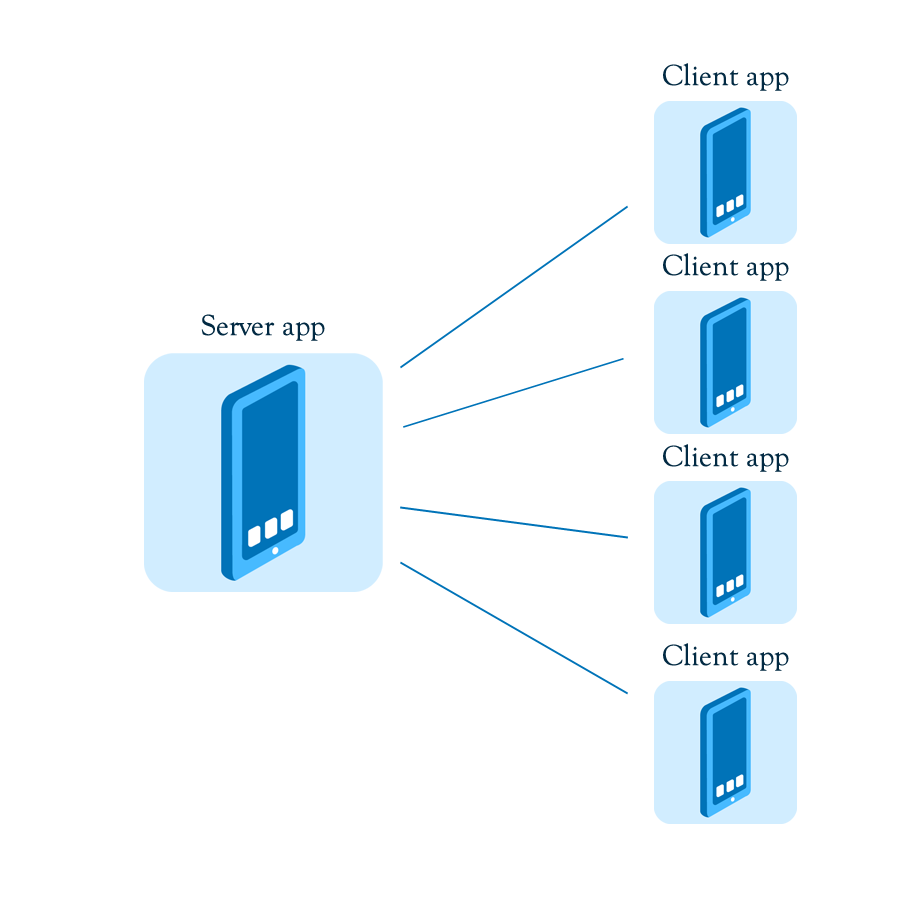
<style>
.page{position:relative;width:900px;height:900px;background:#ffffff}
.page>*{position:absolute;margin:0}
.t1{font:30px "GoudyOldStyleT-Regular";color:#022a43}
</style>
<div class="page">
<p class="t1" style="left:663px;top:63px;width:126px;height:28px">Client app</p>
<p class="t1" style="left:663px;top:253px;width:126px;height:28px">Client app</p>
<p class="t1" style="left:201px;top:314px;width:124px;height:27px">Server app</p>
<p class="t1" style="left:663px;top:444px;width:126px;height:28px">Client app</p>
<p class="t1" style="left:663px;top:643px;width:126px;height:28px">Client app</p>
</div>
